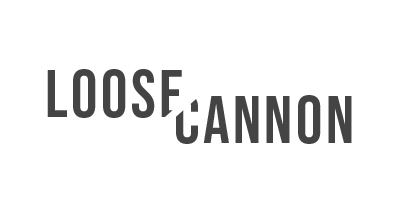
<style>
.page{position:relative;width:400px;height:200px;background:#ffffff}
.page>*{position:absolute;margin:0}
.t1{font:66.7px "BebasNeue-Regular";letter-spacing:0.05em;font-variant:small-caps}
.t2{font:66.7px "BebasNeue-Regular";letter-spacing:0.05em;color:#444444;font-variant:small-caps}
</style>
<div class="page">
<p class="t1" style="left:47px;top:69px;width:318px;height:49px">LOOSECANNON</p>
<p class="t2" style="left:34px;top:95px;width:318px;height:49px">LOOSECANNON</p>
</div>
